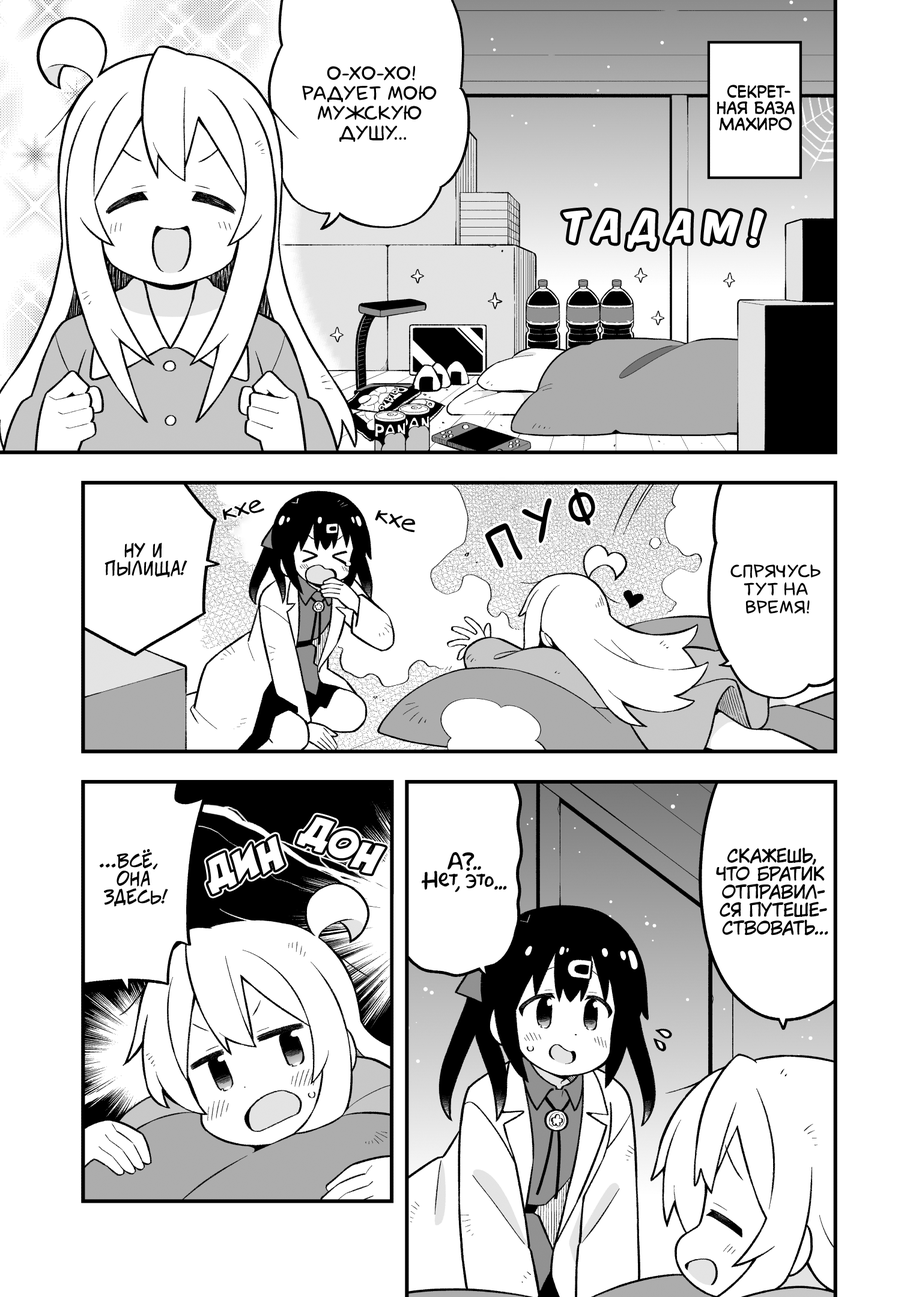
<style>
.page{position:relative;width:919px;height:1297px;background:#ffffff}
.page>*{position:absolute;margin:0}
.t1{font:19.8px "laCartoonerie";color:#000000;text-transform:uppercase}
.t2{font:16.2px "v_CCMonologous";color:#000000;text-transform:uppercase}
.t3{font:36px "KomikaTitle-AxisRUS-LAT";color:#ffffff}
.t4{font:54.1px "laCartoonerie";color:#000000;text-transform:uppercase}
.t5{font:25.2px "v_Augie";color:#000000}
.t6{font:18px "v_CCJeffCampbell";color:#000000;text-transform:uppercase}
.t7{font:18px "laCartoonerie";color:#000000;text-transform:uppercase}
.t8{font:39.6px "v_CCRatatatat";color:#ffffff;text-transform:uppercase}
.t9{font:19.8px "AkbarPlain";color:#000000}
.t10{font:18px "KuraiVoice2";color:#000000;text-transform:uppercase}
</style>
<div class="page">
<p class="t1" style="left:302px;top:65px;width:135px;height:77px;text-align:center">О-хо-хо!<br>Радует мою<br>мужскую<br>душу...</p>
<p class="t2" style="left:717px;top:85px;width:78px;height:46px;text-align:center">Секрет-<br>ная база<br>Махиро</p>
<p class="t3" style="left:563px;top:210px;width:26px;height:33px">т</p>
<p class="t3" style="left:592px;top:210px;width:27px;height:33px">а</p>
<p class="t3" style="left:627px;top:210px;width:30px;height:39px">д</p>
<p class="t3" style="left:666px;top:210px;width:25px;height:33px">а</p>
<p class="t3" style="left:703px;top:211px;width:37px;height:33px">м</p>
<p class="t3" style="left:749px;top:210px;width:15px;height:35px">!</p>
<p class="t4" style="left:568px;top:488px;width:27px;height:38px;rotate:-23deg">ф</p>
<p class="t5" style="left:222px;top:500px;width:42px;height:20px;rotate:-11deg">кхе</p>
<p class="t5" style="left:375px;top:510px;width:41px;height:23px;rotate:20deg">кхе</p>
<p class="t4" style="left:522px;top:499px;width:30px;height:45px;rotate:-24deg">у</p>
<p class="t4" style="left:485px;top:523px;width:38px;height:45px;rotate:-26deg">п</p>
<p class="t6" style="left:105px;top:543px;width:82px;height:35px;text-align:center">Ну и<br>пылища!</p>
<p class="t7" style="left:730px;top:565px;width:91px;height:49px;text-align:center">Спрячусь<br>тут на<br>время!</p>
<p class="t8" style="left:297px;top:817px;width:89px;height:58px;rotate:28deg">дон</p>
<p class="t8" style="left:208px;top:836px;width:77px;height:58px;rotate:-17deg">дин</p>
<p class="t6" style="left:99px;top:849px;width:69px;height:58px;text-align:center">...Всё,<br>она<br>здесь!</p>
<p class="t9" style="left:422px;top:852px;width:85px;height:41px;text-align:center">А?..<br>Нет, это...</p>
<p class="t10" style="left:716px;top:848px;width:112px;height:88px;text-align:center">Скажешь,<br>что братик<br>отправил-<br>ся путеше-<br>ствовать...</p>
</div>
